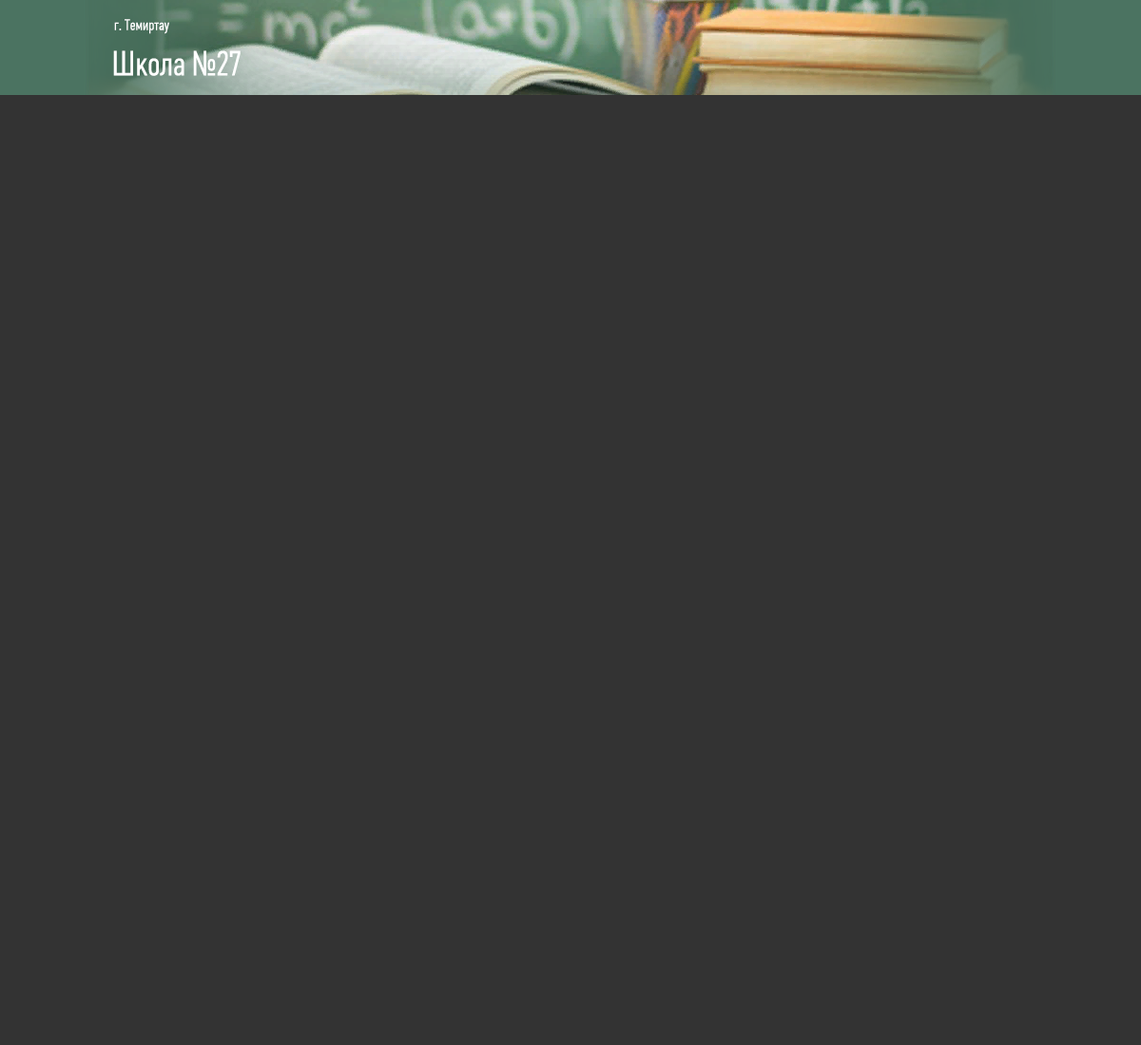
<style>
.page{position:relative;width:1141px;height:1045px;background:#333333}
.page>*{position:absolute;margin:0}
.t1{font:15.2px "PlumbCondensed-Regular";color:#ffffff}
.t2{font:34.2px "PlumbCondensed-Regular";color:#ffffff}
</style>
<div class="page">
<p class="t1" style="left:114px;top:19px;width:55px;height:15px">г. Темиртау</p>
<p class="t2" style="left:113px;top:50px;width:127px;height:26px">Школа №27</p>
</div>
